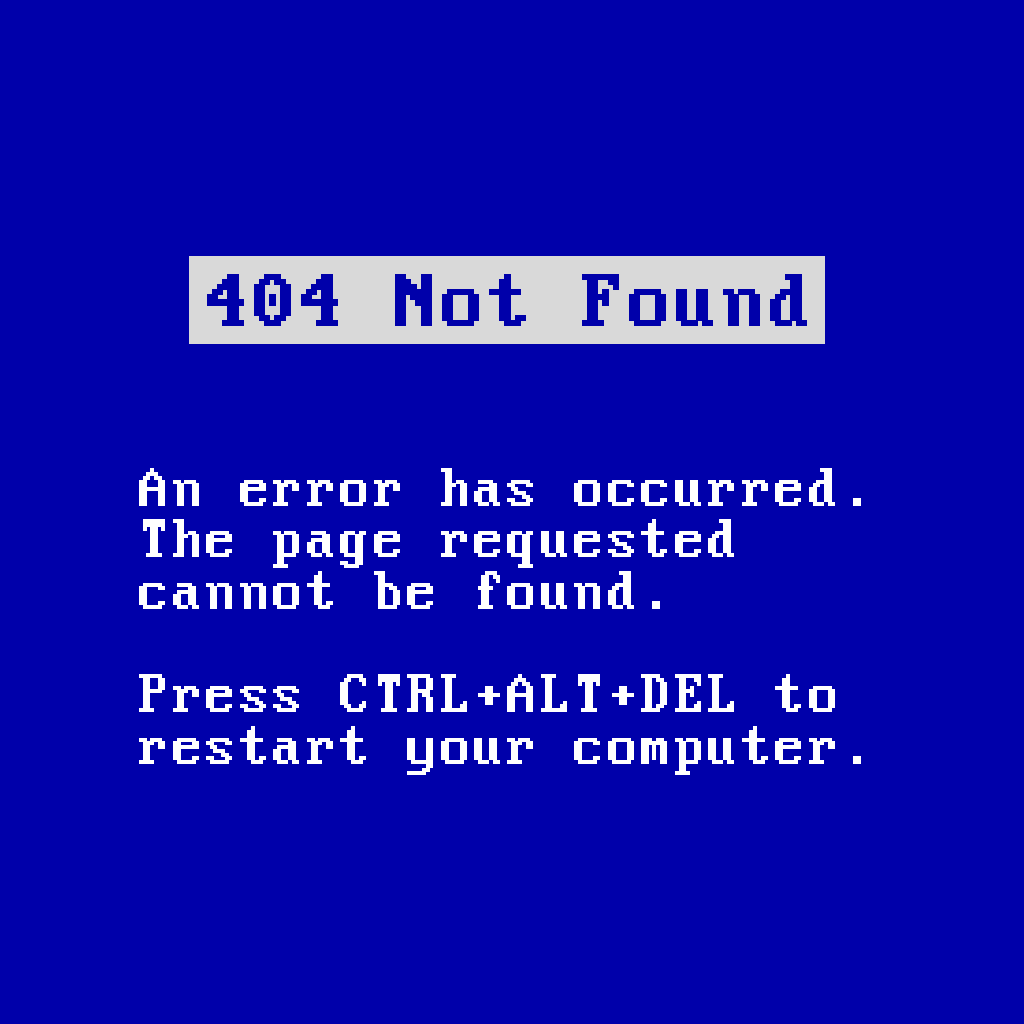
<style>
.page{position:relative;width:1024px;height:1024px;background:#0000aa}
.page>*{position:absolute;margin:0}
.t1{font:40.7px "PerfectDOSVGA437";color:#0000aa;font-weight:bold}
.t2{font:29.8px/51.6px "PerfectDOSVGA437";color:#ffffff}
</style>
<div class="page">
<p class="t1" style="left:207px;top:274px;width:600px;height:52px">404 Not Found</p>
<p class="t2" style="left:139px;top:468px;width:722px;height:307px">An error has occurred. The page requested cannot be found.<br><br>Press CTRL+ALT+DEL to restart your computer.</p>
</div>
